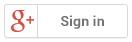
<style>
.page{position:relative;width:132px;height:42px;background:#ffffff}
.page>*{position:absolute;margin:0}
.t1{font:14px "Roboto-Bold";letter-spacing:0.01em;color:#737373}
</style>
<div class="page">
<p class="t1" style="left:61px;top:15px;width:43px;height:14px">Sign in</p>
</div>
